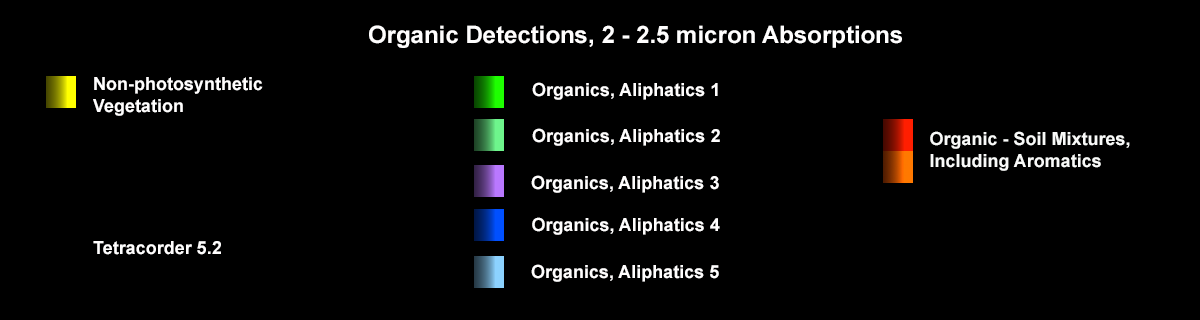
<style>
.page{position:relative;width:1200px;height:320px;background:#000000}
.page>*{position:absolute;margin:0}
.t1{font:24px "Arial-BoldMT";color:#fffefe}
.t2{font:18px "Arial-BoldMT";color:#fffefe}
.t3{font:18px "Arial-BoldMT";color:#f9faf9}
</style>
<div class="page">
<p class="t1" style="left:369px;top:25px;width:533px;height:23px">Organic Detections, 2 - 2.5 micron Absorptions</p>
<p class="t2" style="left:93px;top:77px;width:170px;height:39px">Non-photosynthetic<br>Vegetation</p>
<p class="t2" style="left:532px;top:82px;width:186px;height:18px">Organics, Aliphatics 1</p>
<p class="t2" style="left:532px;top:128px;width:188px;height:18px">Organics, Aliphatics 2</p>
<p class="t3" style="left:930px;top:131px;width:200px;height:40px">Organic - Soil Mixtures,<br>Including Aromatics</p>
<p class="t2" style="left:531px;top:175px;width:188px;height:18px">Organics, Aliphatics 3</p>
<p class="t2" style="left:532px;top:217px;width:188px;height:18px">Organics, Aliphatics 4</p>
<p class="t2" style="left:93px;top:241px;width:128px;height:14px">Tetracorder 5.2</p>
<p class="t2" style="left:531px;top:264px;width:188px;height:18px">Organics, Aliphatics 5</p>
</div>
